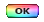
<style>
.page{position:relative;width:44px;height:22px;background:#ffffff}
.page>*{position:absolute;margin:0}
.t1{font:8.3px "Tahoma-Bold";color:#1a1919;scale:1.21 1}
</style>
<div class="page">
<p class="t1" style="left:15px;top:8px;width:15px;height:6px">OK</p>
</div>
